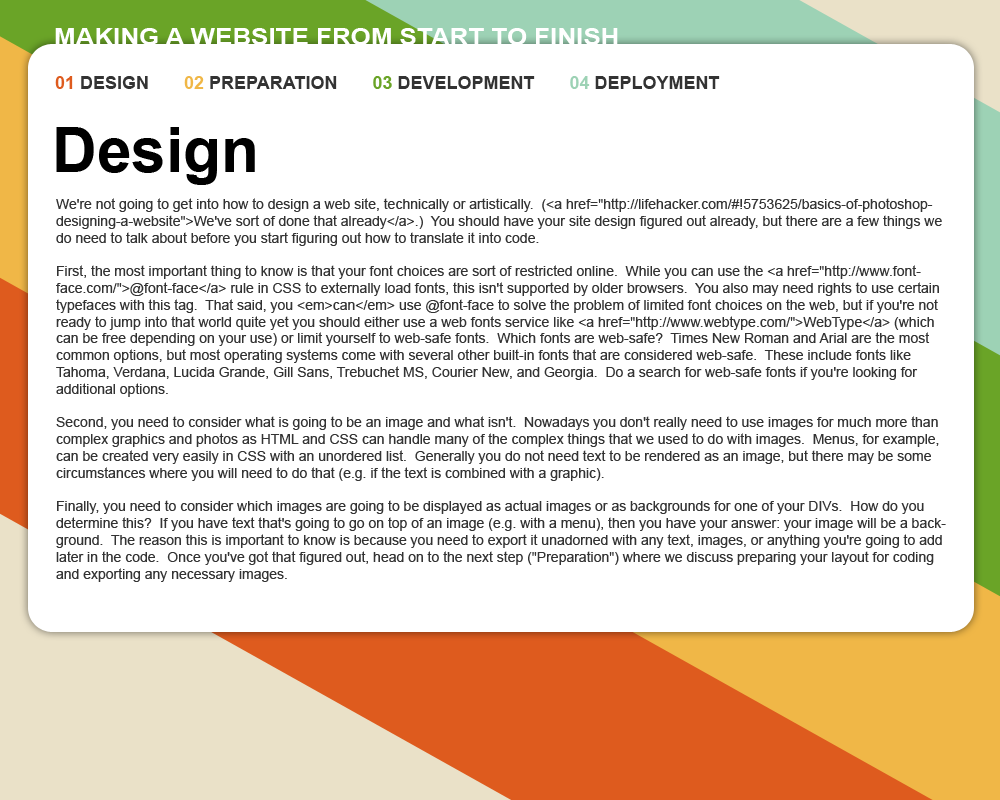
<style>
.page{position:relative;width:1000px;height:800px;background:#ffffff}
.page>*{position:absolute;margin:0}
.t1{font:24px "Arial-BoldMT";color:#ffffff;scale:1.08 1}
.t2{font:18px "Arial-BoldMT";color:#333333}
.t3{font:18px "Arial-BoldMT";color:#de5b1e}
.t4{font:18px "Arial-BoldMT";color:#f0b747}
.t5{font:18px "Arial-BoldMT";color:#6aa427}
.t6{font:18px "Arial-BoldMT";color:#9dd2b5}
.t7{font:62.1px "Arial-BoldMT";color:#000000}
.t8{font:14px "ArialMT";color:#333333}
</style>
<div class="page">
<p class="t1" style="left:55px;top:28px;width:563px;height:17px">MAKING A WEBSITE FROM START TO FINISH</p>
<p class="t2" style="left:55px;top:76px;width:665px;height:13px"><span class="t3">01 </span>DESIGN       <span class="t4">02 </span>PREPARATION       <span class="t5">03 </span>DEVELOPMENT       <span class="t6">04 </span>DEPLOYMENT</p>
<p class="t7" style="left:56px;top:127px;width:199px;height:58px">Design</p>
<p class="t8" style="left:56px;top:198px;width:890px;height:384px">We're not going to get into how to design a web site, technically or artistically.  (&lt;a href="http://lifehacker.com/#!5753625/basics-of-photoshop-designing-a-website"&gt;We've sort of done that already&lt;/a&gt;.)  You should have your site design figured out already, but there are a few things we do need to talk about before you start figuring out how to translate it into code.<br><br>First, the most important thing to know is that your font choices are sort of restricted online.  While you can use the &lt;a href="http://www.font-face.com/"&gt;@font-face&lt;/a&gt; rule in CSS to externally load fonts, this isn't supported by older browsers.  You also may need rights to use certain typefaces with this tag.  That said, you &lt;em&gt;can&lt;/em&gt; use @font-face to solve the problem of limited font choices on the web, but if you're not ready to jump into that world quite yet you should either use a web fonts service like &lt;a href="http://www.webtype.com/"&gt;WebType&lt;/a&gt; (which can be free depending on your use) or limit yourself to web-safe fonts.  Which fonts are web-safe?  Times New Roman and Arial are the most common options, but most operating systems come with several other built-in fonts that are considered web-safe.  These include fonts like Tahoma, Verdana, Lucida Grande, Gill Sans, Trebuchet MS, Courier New, and Georgia.  Do a search for web-safe fonts if you're looking for additional options.<br><br>Second, you need to consider what is going to be an image and what isn't.  Nowadays you don't really need to use images for much more than complex graphics and photos as HTML and CSS can handle many of the complex things that we used to do with images.  Menus, for example, can be created very easily in CSS with an unordered list.  Generally you do not need text to be rendered as an image, but there may be some circumstances where you will need to do that (e.g. if the text is combined with a graphic).<br><br>Finally, you need to consider which images are going to be displayed as actual images or as backgrounds for one of your DIVs.  How do you determine this?  If you have text that's going to go on top of an image (e.g. with a menu), then you have your answer: your image will be a background.  The reason this is important to know is because you need to export it unadorned with any text, images, or anything you're going to add later in the code.  Once you've got that figured out, head on to the next step ("Preparation") where we discuss preparing your layout for coding and exporting any necessary images.</p>
</div>
